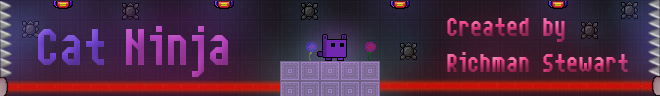
<style>
.page{position:relative;width:660px;height:96px}
.page>*{position:absolute;margin:0}
.t1{font:60px "NarrowRectangle-7"}
.t2{font:60px "NarrowRectangle-7";color:#b744be}
.t3{font:30px "NarrowRectangle-7"}
</style>
<div class="page">
<p class="t1" style="left:38px;top:29px;width:66px;height:36px">Cat</p>
<p class="t2" style="left:126px;top:26px;width:102px;height:51px">Ninja</p>
<p class="t3" style="left:447px;top:18px;width:181px;height:54px">Created by<br>Richman Stewart</p>
</div>
